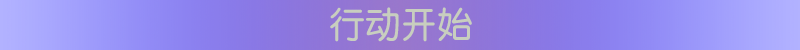
<style>
.page{position:relative;width:800px;height:50px}
.page>*{position:absolute;margin:0}
.t1{font:36px "GBYenRound-Bold";color:#c8cebf}
</style>
<div class="page">
<p class="t1" style="left:330px;top:7px;width:142px;height:35px">行动开始</p>
</div>
